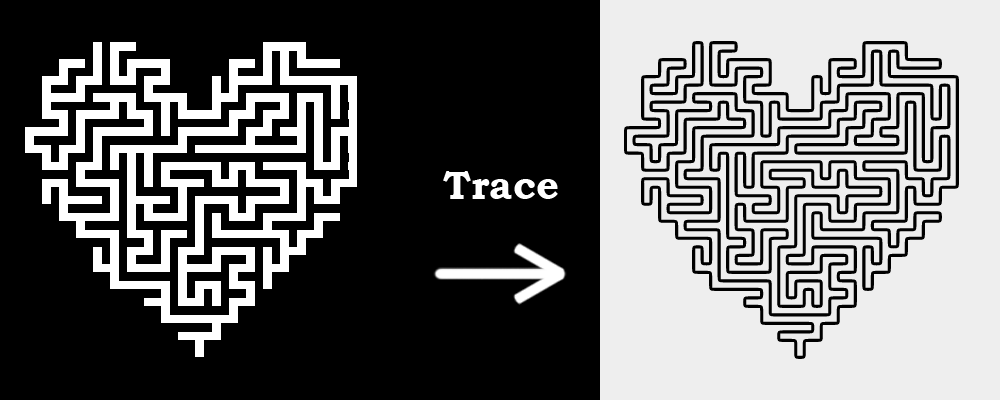
<style>
.page{position:relative;width:1000px;height:400px;background:#000000}
.page>*{position:absolute;margin:0}
.t1{font:40px "BookmanOldStyle-Bold";color:#ffffff}
</style>
<div class="page">
<p class="t1" style="left:443px;top:171px;width:115px;height:28px">Trace</p>
</div>
